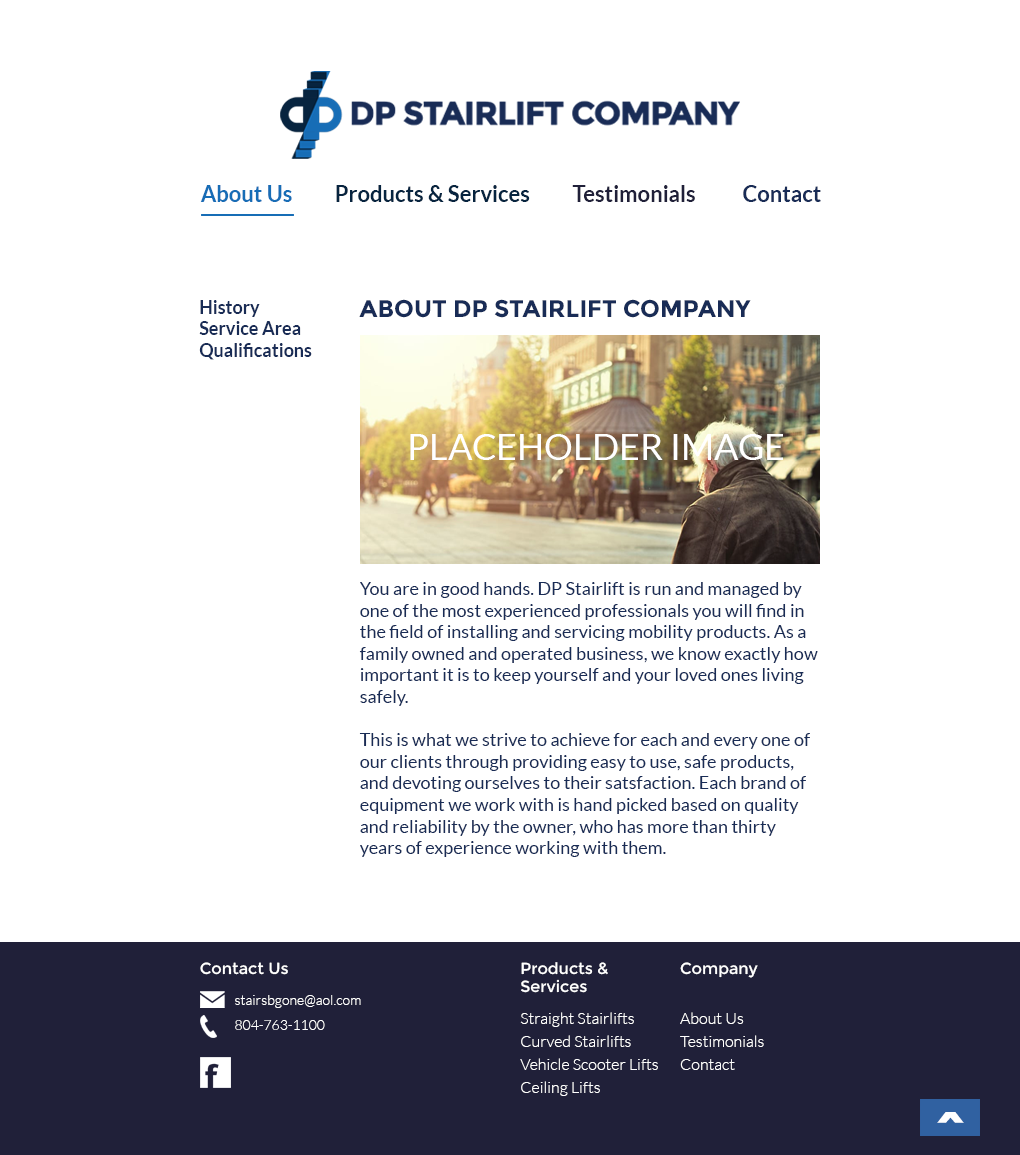
<style>
.page{position:relative;width:1020px;height:1155px;background:#ffffff}
.page>*{position:absolute;margin:0}
.t1{font:22px "Lato-Bold";color:#07243f}
.t2{font:22px "Lato-Bold";color:#176db6}
.t3{font:22px "Lato-Bold";color:#202039}
.t4{font:22px "Lato-Bold";color:#192c56}
.t5{font:18px "Lato-Bold";color:#192c56}
.t6{font:18px "Lato-Regular";color:#192c56}
.t7{font:24px "Montserrat-Bold";color:#192c56}
.t8{font:18px/4px "Lato-Regular";color:#192c56}
.t9{font:36px "Lato-Regular";color:#ffffff}
.t10{font:16px "Montserrat-Regular";color:#ffffff}
.t11{font:16px/23px "Lato-Light";color:#ffffff}
.t12{font:16px/20px "Montserrat-Regular";color:#ffffff}
.t13{font:16px/18px "Montserrat-Regular";color:#ffffff}
.t14{font:16px/16px "Lato-Light";color:#ffffff}
.t15{font:16px/16px "Montserrat-Regular";color:#ffffff}
.t16{font:16px/34px "Lato-Light";color:#ffffff}
.t17{font:14px/6px "Lato-Light";color:#ffffff}
.t18{font:14px/25px "Lato-Light";color:#ffffff}
.t19{font:60px "Montserrat-Bold";color:#ffffff}
</style>
<div class="page">
<p class="t1" style="left:200px;top:185px;width:621px;height:17px"><span class="t2">About Us          </span>Products &amp; Services          <span class="t3">Testimonials</span><span class="t4">           Contact</span></p>
<p class="t5" style="left:199px;top:300px;width:113px;height:60px">History<br>Service Area<br>Qualifications</p>
<p class="t6" style="left:359px;top:299px;width:459px;height:558px"><span class="t7">ABOUT DP STAIRLIFT COMPANY<br><br><br><br><br><br><br><br><br><br><br><br></span><span class="t8"><br><br><br><br><br><br><br><br><br>You are in good hands. DP Stairlift is run and managed by </span>one of the most experienced professionals you will find in the field of installing and servicing mobility products. As a family owned and operated business, we know exactly how <br>important it is to keep yourself and your loved ones living safely. <br><br>This is what we strive to achieve for each and every one of our clients through providing easy to use, safe products, and devoting ourselves to their satsfaction. Each brand of equipment we work with is hand picked based on quality and reliability by the owner, who has more than thirty years of experience working with them.</p>
<p class="t9" style="left:410px;top:434px;width:373px;height:26px">PLACEHOLDER IMAGE</p>
<p class="t10" style="left:200px;top:962px;width:88px;height:13px">Contact Us</p>
<p class="t11" style="left:520px;top:962px;width:138px;height:134px"><span class="t12">Products &amp; <br></span><span class="t13">Services<br><br></span><span class="t14">Straight Stairlifts<br></span>Curved Stairlifts<br>Vehicle Scooter Lifts<br>Ceiling Lifts</p>
<p class="t11" style="left:680px;top:962px;width:84px;height:108px"><span class="t15">Company<br><br></span><span class="t16">About Us <br></span>Testimonials<br>Contact</p>
<p class="t17" style="left:235px;top:995px;width:126px;height:35px">stairsbgone@aol.com<br><span class="t18">804-763-1100</span></p>
<p class="t19" style="left:937px;top:1112px;width:27px;height:11px">^</p>
</div>
